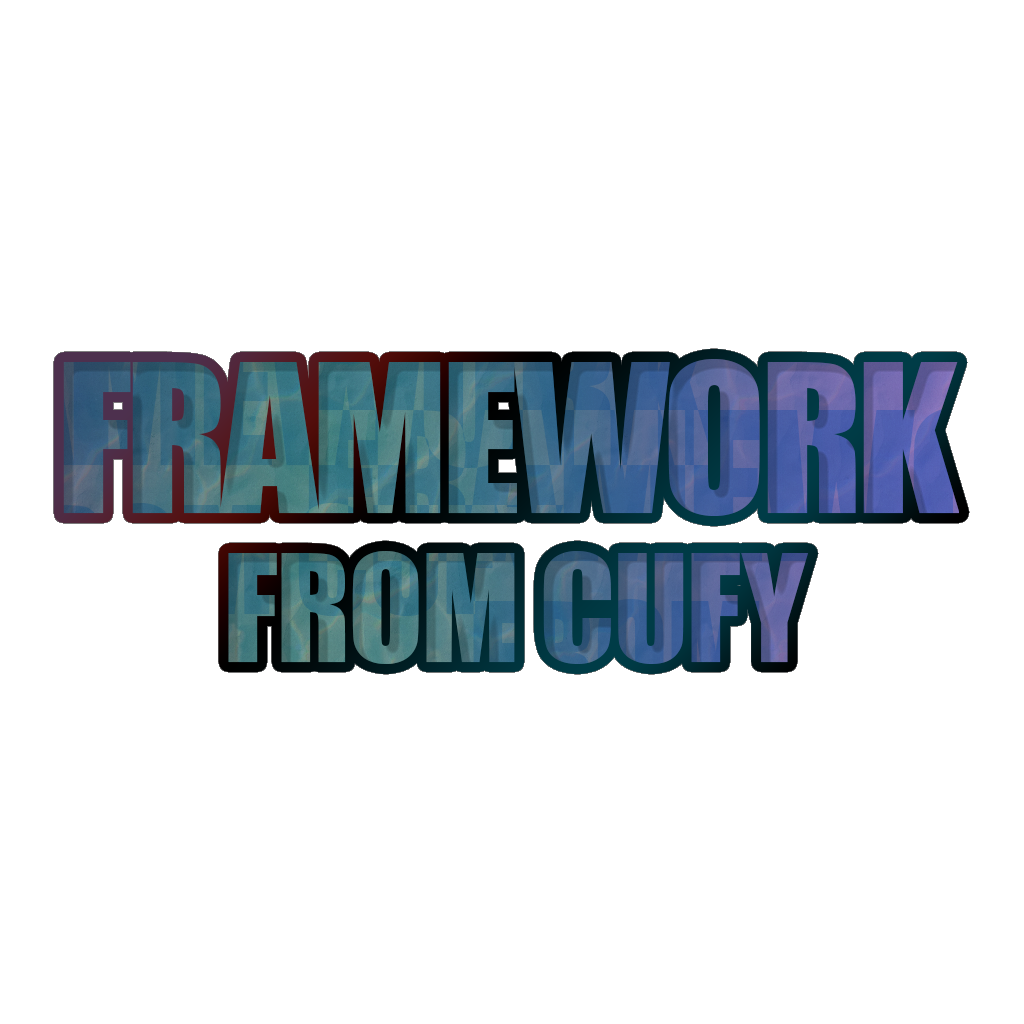
<style>
.page{position:relative;width:1024px;height:1024px;background:#ffffff}
.page>*{position:absolute;margin:0}
.t1{font:190.5px/148.2px "Impact";letter-spacing:-0.035em}
.t2{font:137.6px/148.2px "Impact";letter-spacing:-0.016em}
</style>
<div class="page">
<p class="t1" style="left:63px;top:359px;width:896px;height:305px;text-align:center">FRAMEWORK<br><span class="t2">FROM CUFY</span></p>
</div>
